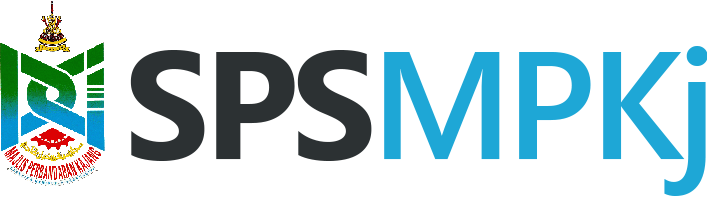
<style>
.page{position:relative;width:707px;height:200px;background:#ffffff}
.page>*{position:absolute;margin:0}
.t1{font:153px "SegoeUI-Semibold";letter-spacing:-0.04em;color:#1ea7d6}
.t2{font:153px "SegoeUI-Bold";letter-spacing:-0.04em;color:#2c3133}
</style>
<div class="page">
<p class="t1" style="left:130px;top:46px;width:578px;height:150px"><span class="t2">SPS</span>MPKj</p>
</div>
